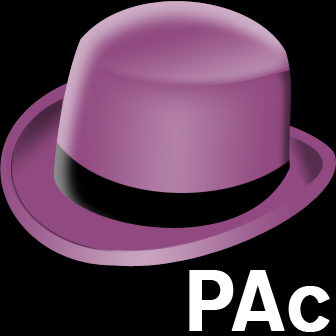
<style>
.page{position:relative;width:336px;height:336px;background:#000000}
.page>*{position:absolute;margin:0}
.t1{font:85px "Gothic725BT-BoldA";color:#ffffff;font-weight:bold}
</style>
<div class="page">
<p class="t1" style="left:189px;top:270px;width:141px;height:62px">PAc</p>
</div>
